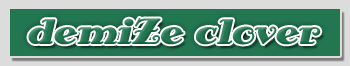
<style>
.page{position:relative;width:350px;height:66px;background:#dcdcdc}
.page>*{position:absolute;margin:0}
.t1{font:36px "AntsyPants";color:#227751}
</style>
<div class="page">
<p class="t1" style="left:28px;top:18px;width:293px;height:27px">demiZe clover</p>
</div>
